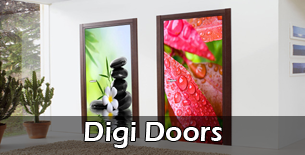
<style>
.page{position:relative;width:305px;height:155px}
.page>*{position:absolute;margin:0}
.t1{font:28px "ErasITC-Demi";color:#ffffff}
</style>
<div class="page">
<p class="t1" style="left:84px;top:122px;width:138px;height:26px">Digi Doors</p>
</div>
